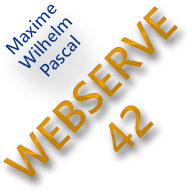
<style>
.page{position:relative;width:192px;height:192px;background:#ffffff}
.page>*{position:absolute;margin:0}
.t1{font:41.7px "MicrosoftJhengHeiUIBold";color:#cc8a00}
.t2{font:16.7px "MicrosoftJhengHeiUIBold";color:#023888}
</style>
<div class="page">
<p class="t1" style="left:3px;top:6px;width:175px;height:172px;text-align:center;rotate:-46deg">WEBSERVE<br>42</p>
<p class="t2" style="left:5px;top:4px;width:76px;height:73px;text-align:center;rotate:-46deg">Maxime<br>Wilhelm<br>Pascal</p>
</div>
